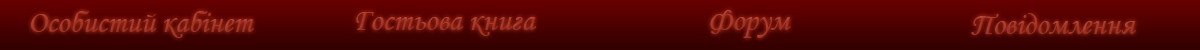
<style>
.page{position:relative;width:1200px;height:50px}
.page>*{position:absolute;margin:0}
.t1{font:31px "MonotypeCorsiva";color:#a83526}
</style>
<div class="page">
<p class="t1" style="left:31px;top:11px;width:223px;height:27px">Особистий кабінет</p>
<p class="t1" style="left:356px;top:12px;width:181px;height:24px">Гостьова книга</p>
<p class="t1" style="left:710px;top:10px;width:81px;height:28px">Форум</p>
<p class="t1" style="left:971px;top:13px;width:165px;height:22px">Повідомлення</p>
</div>
